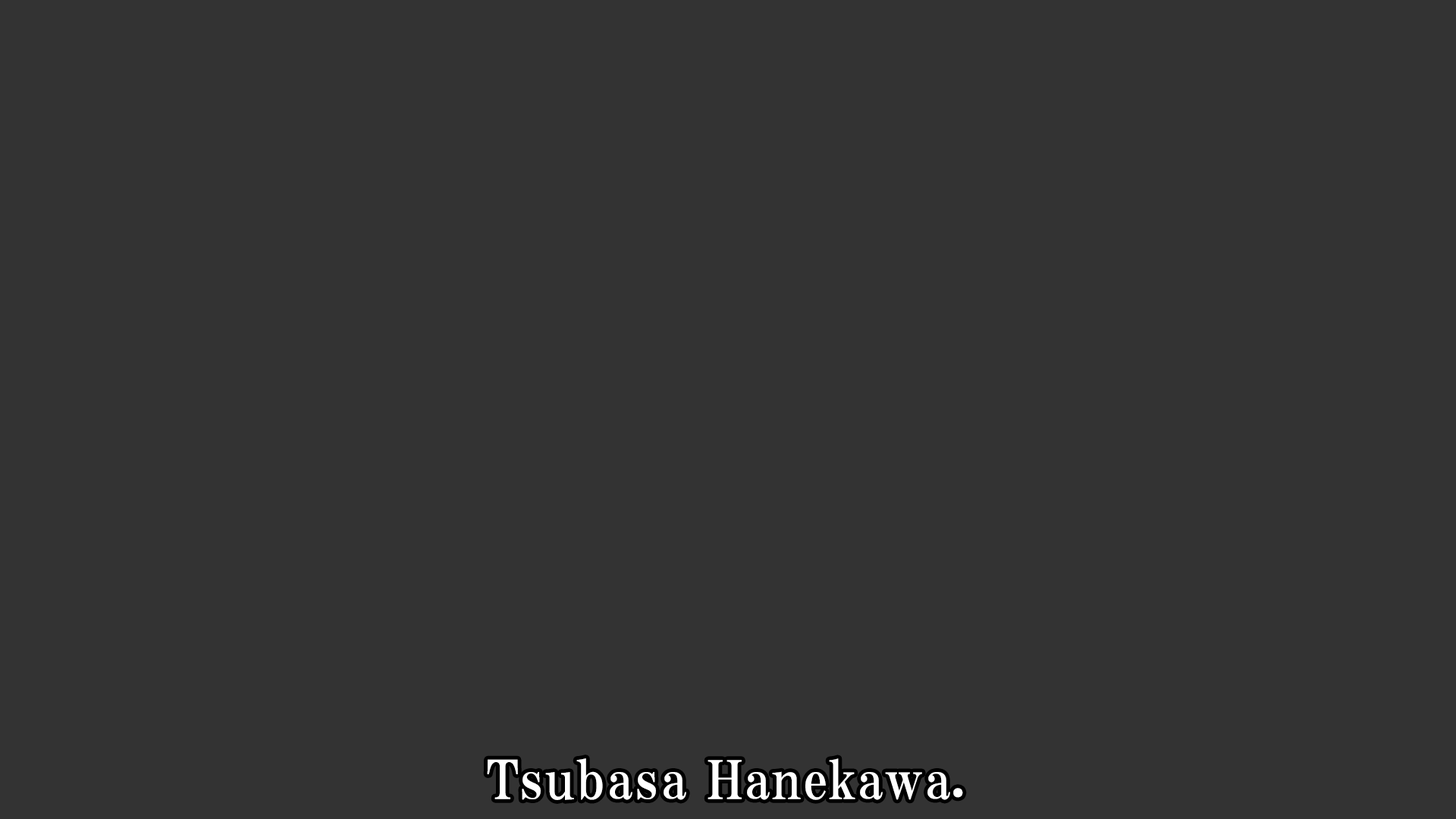
<style>
.page{position:relative;width:1456px;height:819px;background:#333333}
.page>*{position:absolute;margin:0}
.t1{font:53.1px "HGPMinchoE";letter-spacing:0.025em;color:#ffffff}
</style>
<div class="page">
<p class="t1" style="left:487px;top:758px;width:476px;height:42px">Tsubasa Hanekawa.</p>
</div>
